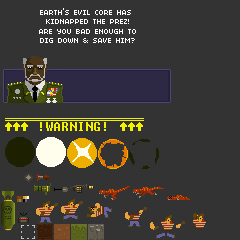
<style>
.page{position:relative;width:240px;height:240px;background:#333333}
.page>*{position:absolute;margin:0}
.t1{font:8px "04b03";color:#ffffff}
.t2{font:8px "NokiaCellphoneFC-Small";color:#ffffff}
</style>
<div class="page">
<p class="t1" style="left:40px;top:8px;width:91px;height:16px;text-align:center">EARTH<span class="t2">’</span>S EVIL CORE HAS<br> KIDNAPPED THE PREZ!</p>
<p class="t1" style="left:39px;top:29px;width:97px;height:14px;text-align:center">ARE YOU BAD ENOUGH TO<br>DIG DOWN &amp; SAVE HIM?</p>
</div>
